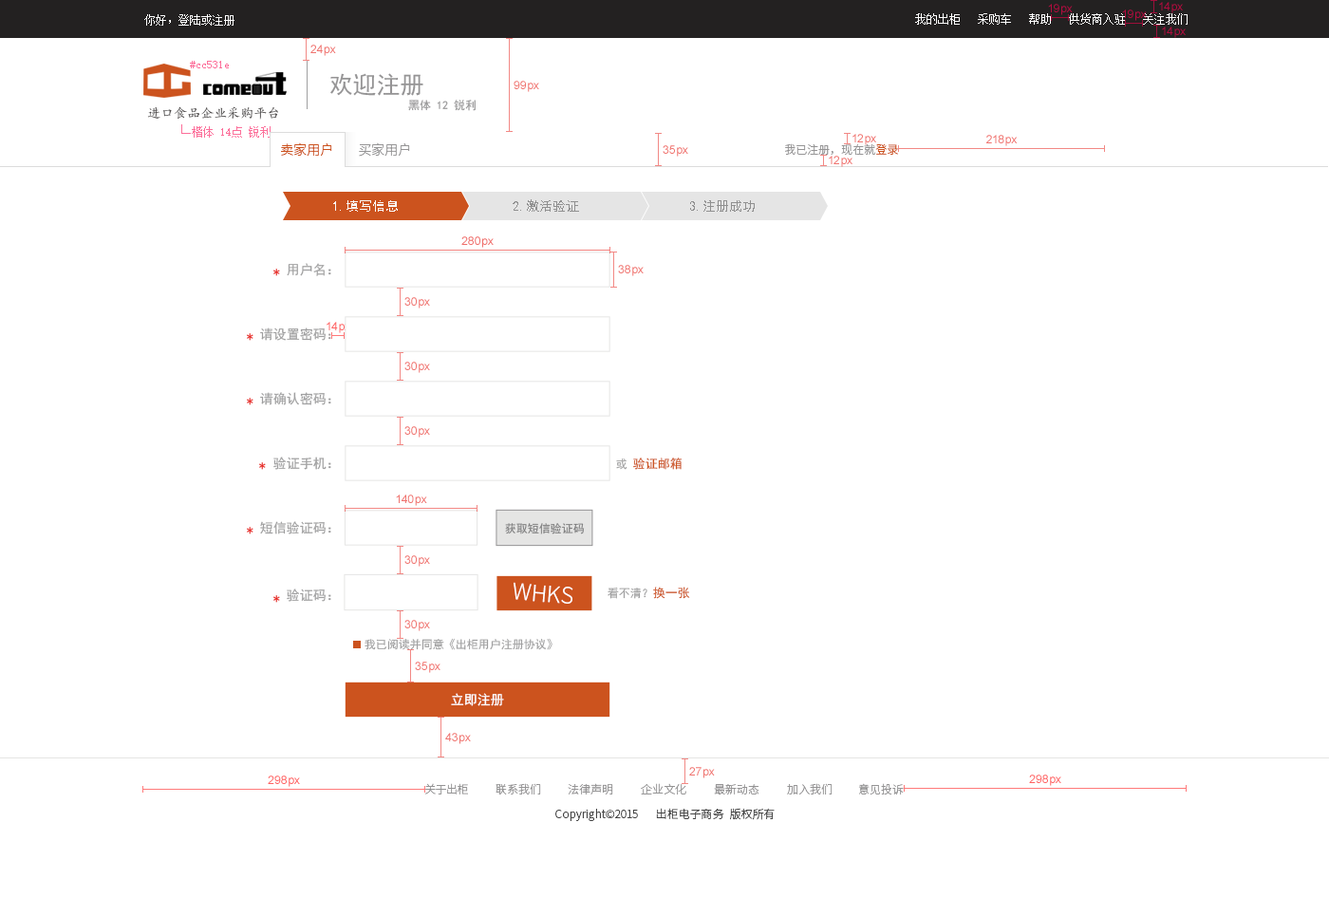
<style>
.page{position:relative;width:1329px;height:897px;background:#ffffff}
.page>*{position:absolute;margin:0}
.t1{font:11.4px "SimSun";color:#ffffff}
.t2{font:11.4px "SimSun";color:#fc6f9a}
.t3{font:23.7px "SimHei";color:#959495}
.t4{font:11.4px "SimHei";color:#959495}
.t5{font:13.3px "¿¬Ìå";color:#464343}
.t6{font:13.3px "SourceHanSansCN-Light";color:#cc531e}
.t7{font:13.3px "SourceHanSansCN-Light";color:#959495}
.t8{font:11.4px "SourceHanSansCN-Light";color:#959495}
.t9{font:11.4px "SourceHanSansCN-Light";color:#cc531e}
.t10{font:13.3px "SimHei";color:#fafafa}
.t11{font:13.3px "SimHei";color:#909090}
.t12{font:13.3px "SimHei";color:#e71f19}
.t13{font:13.3px "SimHei";color:#9f9fa0}
.t14{font:11.4px "SimHei";color:#9f9fa0}
.t15{font:12.3px "SimHei";color:#cc531e}
.t16{font:11.4px "SimHei";color:#7c7c7d}
.t17{font:22.4px "SourceHanSansCN-Light";color:#ffffff}
.t18{font:13.3px "SimHei";color:#ffffff}
.t19{font:11.4px "SourceHanSansCN-Light";color:#434343}
</style>
<div class="page">
<p class="t1" style="left:144px;top:14px;width:90px;height:12px">你好，登陆或注册</p>
<p class="t1" style="left:915px;top:13px;width:273px;height:12px">我的出柜   采购车   帮助   供货商入驻   关注我们</p>
<p class="t2" style="left:190px;top:61px;width:39px;height:7px">#cc531e</p>
<p class="t3" style="left:330px;top:73px;width:93px;height:23px">欢迎注册</p>
<p class="t4" style="left:408px;top:100px;width:68px;height:11px">黑体 12 锐利</p>
<p class="t5" style="left:147px;top:106px;width:131px;height:14px">进口食品企业采购平台</p>
<p class="t6" style="left:281px;top:142px;width:51px;height:15px">卖家用户</p>
<p class="t7" style="left:359px;top:142px;width:51px;height:15px">买家用户</p>
<p class="t8" style="left:785px;top:143px;width:113px;height:12px">我已注册，现在就<span class="t9">登录</span></p>
<p class="t10" style="left:333px;top:200px;width:65px;height:12px">1.填写信息</p>
<p class="t11" style="left:513px;top:199px;width:66px;height:13px">2.激活验证</p>
<p class="t11" style="left:690px;top:200px;width:65px;height:12px">3.注册成功</p>
<p class="t12" style="left:273px;top:269px;width:7px;height:7px">*</p>
<p class="t13" style="left:287px;top:263px;width:44px;height:13px">用户名：</p>
<p class="t13" style="left:260px;top:328px;width:71px;height:13px">请设置密码：</p>
<p class="t12" style="left:247px;top:333px;width:6px;height:8px">*</p>
<p class="t12" style="left:247px;top:398px;width:6px;height:7px">*</p>
<p class="t13" style="left:260px;top:392px;width:71px;height:13px">请确认密码：</p>
<p class="t13" style="left:273px;top:457px;width:58px;height:13px">验证手机：</p>
<p class="t14" style="left:616px;top:459px;width:12px;height:11px">或</p>
<p class="t15" style="left:633px;top:458px;width:50px;height:12px">验证邮箱</p>
<p class="t12" style="left:259px;top:462px;width:7px;height:8px">*</p>
<p class="t13" style="left:260px;top:521px;width:71px;height:13px">短信验证码：</p>
<p class="t12" style="left:247px;top:527px;width:6px;height:7px">*</p>
<p class="t16" style="left:505px;top:523px;width:80px;height:11px">获取短信验证码</p>
<p class="t17" style="left:514px;top:582px;width:59px;height:22px;rotate:5deg">WHKS</p>
<p class="t13" style="left:287px;top:589px;width:44px;height:13px">验证码：</p>
<p class="t14" style="left:608px;top:588px;width:39px;height:11px">看不清？</p>
<p class="t15" style="left:653px;top:587px;width:37px;height:12px">换一张</p>
<p class="t12" style="left:273px;top:595px;width:7px;height:8px">*</p>
<p class="t14" style="left:365px;top:638px;width:188px;height:12px">我已阅读并同意《出柜用户注册协议》</p>
<p class="t18" style="left:451px;top:693px;width:53px;height:13px">立即注册</p>
<p class="t8" style="left:425px;top:783px;width:43px;height:12px">关于出柜</p>
<p class="t8" style="left:496px;top:783px;width:45px;height:12px">联系我们</p>
<p class="t8" style="left:568px;top:783px;width:45px;height:12px">法律声明</p>
<p class="t8" style="left:641px;top:783px;width:45px;height:12px">企业文化</p>
<p class="t8" style="left:714px;top:784px;width:45px;height:12px">最新动态</p>
<p class="t8" style="left:787px;top:783px;width:46px;height:12px">加入我们</p>
<p class="t8" style="left:858px;top:783px;width:46px;height:13px">意见投诉</p>
<p class="t19" style="left:555px;top:809px;width:83px;height:12px">Copyright©2015</p>
<p class="t19" style="left:656px;top:808px;width:68px;height:11px">出柜电子商务</p>
<p class="t19" style="left:730px;top:808px;width:45px;height:12px">版权所有</p>
</div>
